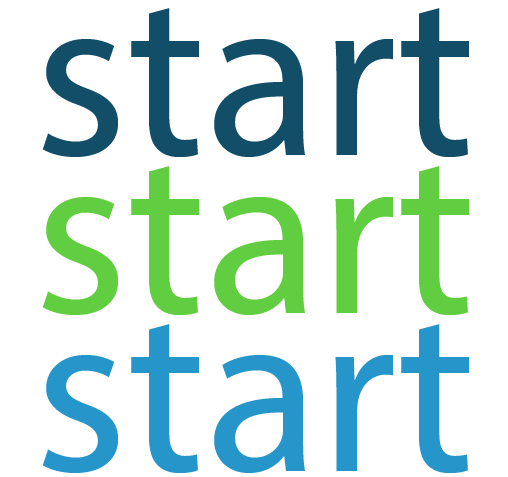
<style>
.page{position:relative;width:508px;height:477px;background:#ffffff}
.page>*{position:absolute;margin:0}
.t1{font:236.1px "MyriadPro-Regular";color:#134e69}
.t2{font:236.1px "MyriadPro-Regular";color:#61cd40}
.t3{font:236.1px "MyriadPro-Regular";color:#2696ca}
</style>
<div class="page">
<p class="t1" style="left:42px;top:8px;width:427px;height:149px">start</p>
<p class="t2" style="left:42px;top:166px;width:427px;height:149px">start</p>
<p class="t3" style="left:42px;top:324px;width:427px;height:149px">start</p>
</div>
